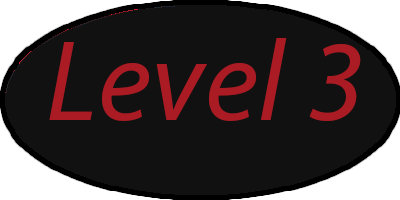
<style>
.page{position:relative;width:400px;height:200px;background:#111111}
.page>*{position:absolute;margin:0}
.t1{font:115.3px "MyriadPro-It";letter-spacing:0.01em;color:#aa1b24}
</style>
<div class="page">
<p class="t1" style="left:49px;top:38px;width:312px;height:84px">Level 3</p>
</div>
